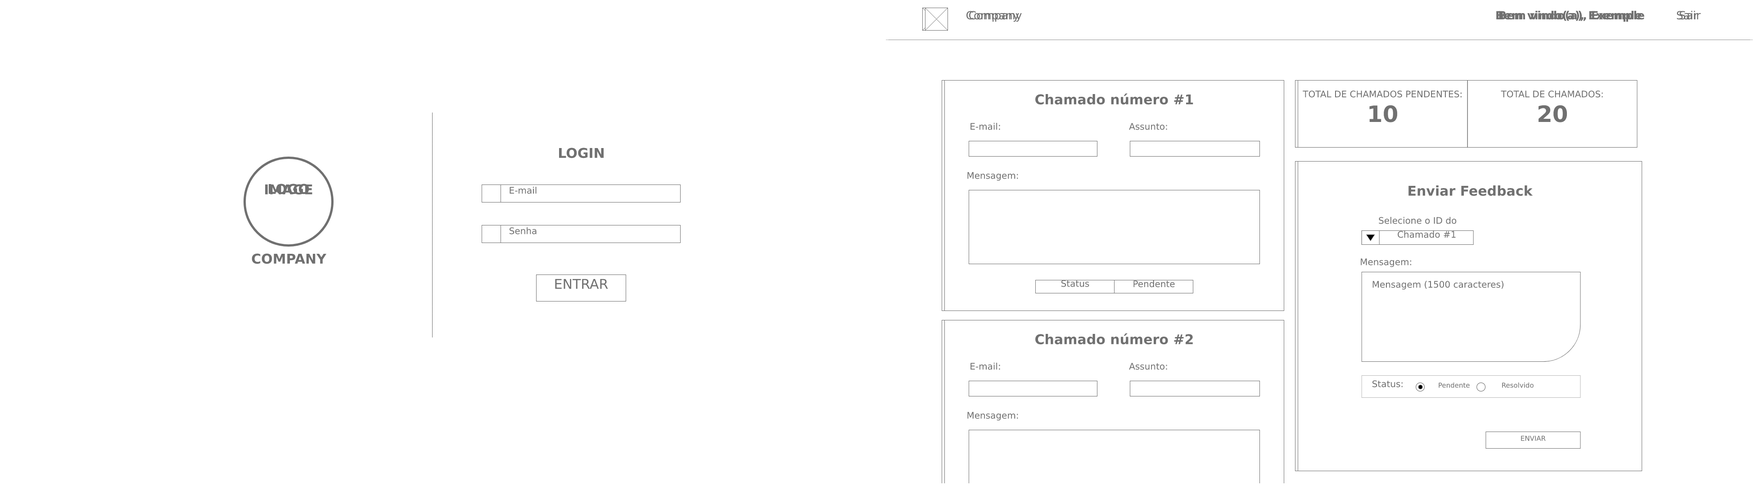
<style>
.page{position:relative;width:1760px;height:486px;background:#ffffff}
.page>*{position:absolute;margin:0}
.t1{font:11.2px "SegoeUI";color:#707070}
.t2{font:11.2px "SegoeUI-Bold";color:#707070}
.t3{font:13.5px "SegoeUI-Bold";color:#707070}
.t4{font:9px "SegoeUI";color:#707070}
.t5{font:22.5px "SegoeUI-Bold";color:#707070}
.t6{font:13.5px/0.5px "SegoeUI-Bold";color:#707070}
.t7{font:13.5px "SegoeUI";color:#707070}
.t8{font:6.8px "SegoeUI";color:#707070}
</style>
<div class="page">
<p class="t1" style="left:966px;top:11px;width:53px;height:11px">Company Name</p>
<p class="t1" style="left:968px;top:11px;width:54px;height:11px">Company Name</p>
<p class="t2" style="left:1496px;top:11px;width:145px;height:11px">Bem vindo(a), Exemple Name</p>
<p class="t2" style="left:1498px;top:11px;width:146px;height:11px">Bem vindo(a), Exemple Name</p>
<p class="t1" style="left:1676px;top:11px;width:22px;height:9px">Sair</p>
<p class="t1" style="left:1679px;top:11px;width:22px;height:9px">Sair</p>
<p class="t3" style="left:1035px;top:93px;width:158px;height:12px">Chamado número #1</p>
<p class="t4" style="left:1302px;top:90px;width:159px;height:8px">TOTAL DE CHAMADOS PENDENTES:</p>
<p class="t4" style="left:1500px;top:90px;width:102px;height:8px">TOTAL DE CHAMADOS:</p>
<p class="t5" style="left:1369px;top:105px;width:28px;height:17px">10</p>
<p class="t5" style="left:1538px;top:105px;width:29px;height:17px">20</p>
<p class="t4" style="left:970px;top:123px;width:30px;height:7px">E-mail:</p>
<p class="t4" style="left:1129px;top:123px;width:38px;height:7px">Assunto:</p>
<p class="t3" style="left:559px;top:148px;width:44px;height:10px">LOGIN</p>
<p class="t4" style="left:967px;top:172px;width:51px;height:9px">Mensagem:</p>
<p class="t6" style="left:265px;top:184px;width:47px;height:11px;text-align:center">LOGO<br>IMAGE</p>
<p class="t3" style="left:1408px;top:185px;width:125px;height:11px">Enviar Feedback</p>
<p class="t4" style="left:509px;top:187px;width:27px;height:7px">E-mail</p>
<p class="t4" style="left:1378px;top:217px;width:78px;height:7px">Selecione o ID do chamado:</p>
<p class="t4" style="left:509px;top:227px;width:27px;height:7px">Senha</p>
<p class="t4" style="left:1397px;top:231px;width:58px;height:7px">Chamado #1</p>
<p class="t3" style="left:252px;top:253px;width:75px;height:11px">COMPANY NAME</p>
<p class="t4" style="left:1360px;top:258px;width:51px;height:9px">Mensagem:</p>
<p class="t7" style="left:555px;top:279px;width:53px;height:10px">ENTRAR</p>
<p class="t4" style="left:1061px;top:280px;width:28px;height:7px">Status</p>
<p class="t4" style="left:1133px;top:280px;width:41px;height:8px">Pendente</p>
<p class="t4" style="left:1372px;top:281px;width:131px;height:9px">Mensagem (1500 caracteres)</p>
<p class="t3" style="left:1035px;top:333px;width:157px;height:12px">Chamado número #2</p>
<p class="t4" style="left:970px;top:363px;width:30px;height:7px">E-mail:</p>
<p class="t4" style="left:1129px;top:363px;width:38px;height:7px">Assunto:</p>
<p class="t4" style="left:1372px;top:380px;width:30px;height:7px">Status:</p>
<p class="t8" style="left:1438px;top:382px;width:31px;height:6px">Pendente</p>
<p class="t8" style="left:1502px;top:382px;width:31px;height:6px">Resolvido</p>
<p class="t4" style="left:967px;top:412px;width:51px;height:9px">Mensagem:</p>
<p class="t8" style="left:1521px;top:436px;width:24px;height:5px">ENVIAR</p>
</div>
